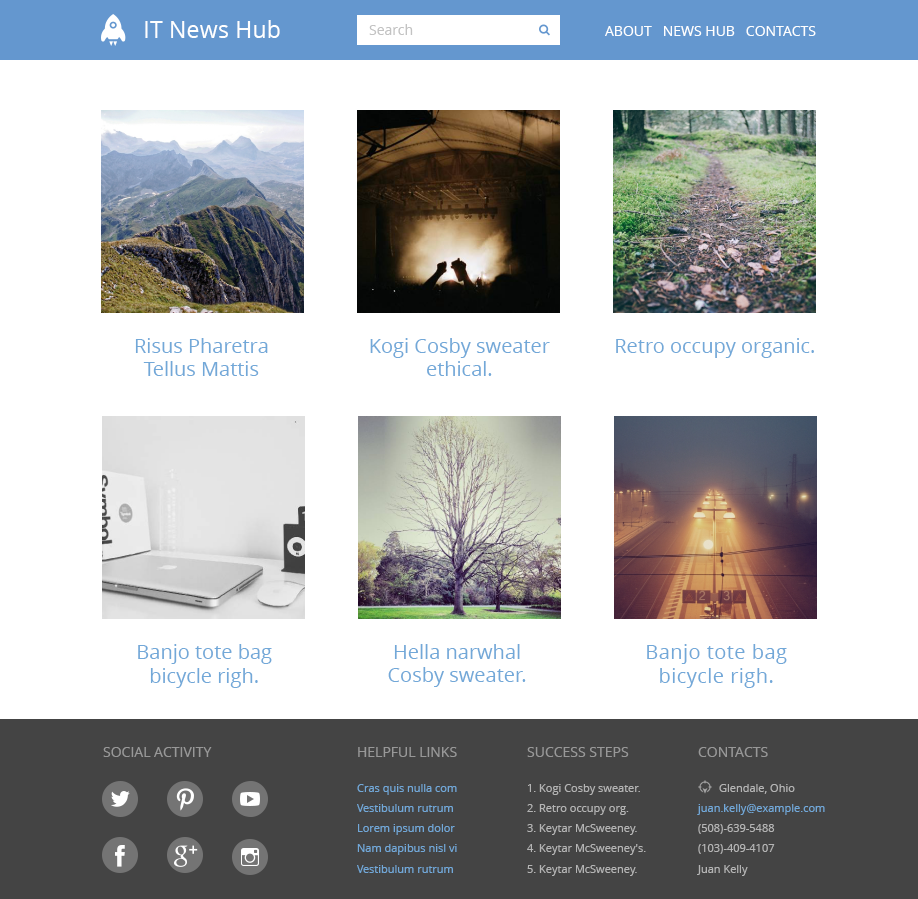
<style>
.page{position:relative;width:918px;height:899px;background:#ffffff}
.page>*{position:absolute;margin:0}
.t1{font:23.4px "OpenSans";color:#ffffff}
.t2{font:14px "OpenSans";color:#c3c3c3}
.t3{font:14px "OpenSans";letter-spacing:-0.017em;color:#c3c3c3}
.t4{font:14px "OpenSans";color:#ffffff}
.t5{font:14px "OpenSans";letter-spacing:-0.067em;color:#ffffff}
.t6{font:20px/23px "OpenSans";color:#72a8d8}
.t7{font:20px/23px "OpenSans";letter-spacing:-0.017em;color:#72a8d8}
.t8{font:20px/23px "OpenSans";letter-spacing:-0.111em;color:#72a8d8}
.t9{font:20px "OpenSans";color:#72a8d8}
.t10{font:20px "OpenSans";letter-spacing:-0.017em;color:#72a8d8}
.t11{font:20px/23px "OpenSans";letter-spacing:-0.091em;color:#72a8d8}
.t12{font:20px "OpenSans";letter-spacing:0.023em;color:#72a8d8}
.t13{font:14px "OpenSans";color:#989898}
.t14{font:14px "OpenSans";letter-spacing:-0.067em;color:#989898}
.t15{font:11px "OpenSans";color:#72a8d8}
.t16{font:11px "OpenSans";color:#b4b4b4}
.t17{font:11px "OpenSans";letter-spacing:-0.091em;color:#b4b4b4}
.t18{font:11px "OpenSans";letter-spacing:-0.054em;color:#72a8d8}
.t19{font:11px "OpenSans";letter-spacing:-0.017em;color:#b4b4b4}
.t20{font:11px "OpenSans";letter-spacing:-0.017em;color:#72a8d8}
.t21{font:11px "OpenSans";letter-spacing:-0.092em;color:#b4b4b4}
</style>
<div class="page">
<p class="t1" style="left:145px;top:20px;width:135px;height:18px">IT News Hub</p>
<p class="t2" style="left:369px;top:24px;width:44px;height:11px">Sea<span class="t3">r</span>ch</p>
<p class="t4" style="left:605px;top:26px;width:211px;height:10px">ABOUT   NEWS HUB   CON<span class="t5">T</span>ACTS</p>
<p class="t6" style="left:135px;top:338px;width:133px;height:38px;text-align:center">Risus Pha<span class="t7">r</span>etra<br><span class="t8">T</span>ellus Mattis</p>
<p class="t6" style="left:370px;top:338px;width:180px;height:38px;text-align:center">Kogi Cosby sweater<br>ethical.</p>
<p class="t9" style="left:616px;top:338px;width:198px;height:20px">Ret<span class="t10">r</span>o occupy organic.</p>
<p class="t9" style="left:138px;top:644px;width:134px;height:44px;text-align:center">Banjo tote bag<br>bicycle righ.</p>
<p class="t6" style="left:388px;top:644px;width:138px;height:43px;text-align:center">Hella narwhal<br>Cosby sweate<span class="t11">r</span>.</p>
<p class="t12" style="left:647px;top:644px;width:140px;height:44px;text-align:center">Banjo tote bag<br>bicycle righ.</p>
<p class="t13" style="left:103px;top:747px;width:109px;height:10px">SOCIAL ACTIVITY</p>
<p class="t13" style="left:358px;top:747px;width:99px;height:10px">HELPFUL LINKS</p>
<p class="t13" style="left:527px;top:747px;width:102px;height:10px">SUCCESS STEPS</p>
<p class="t13" style="left:698px;top:747px;width:70px;height:10px">CON<span class="t14">T</span>ACTS</p>
<p class="t15" style="left:357px;top:784px;width:100px;height:11px">Cras quis nulla com</p>
<p class="t16" style="left:528px;top:784px;width:112px;height:11px">1. Kogi Cosby sweate<span class="t17">r</span>.</p>
<p class="t16" style="left:719px;top:784px;width:76px;height:10px">Glendale, Ohio</p>
<p class="t15" style="left:357px;top:804px;width:96px;height:8px"><span class="t18">V</span>estibulum rutrum</p>
<p class="t16" style="left:527px;top:804px;width:102px;height:11px">2. Ret<span class="t19">r</span>o occupy org.</p>
<p class="t15" style="left:697px;top:804px;width:128px;height:11px">juan.kelly@example.com</p>
<p class="t15" style="left:358px;top:824px;width:97px;height:11px">Lo<span class="t20">r</span>em ipsum dolor</p>
<p class="t16" style="left:527px;top:824px;width:110px;height:11px">3. Keytar McSweene<span class="t21">y</span>.</p>
<p class="t16" style="left:698px;top:824px;width:77px;height:10px">(508)-639-5488</p>
<p class="t15" style="left:357px;top:844px;width:100px;height:11px">Nam dapibus nisl vi</p>
<p class="t16" style="left:527px;top:844px;width:119px;height:11px">4. Keytar McSweeney's.</p>
<p class="t16" style="left:698px;top:844px;width:77px;height:10px">(103)-409-4107</p>
<p class="t15" style="left:357px;top:865px;width:96px;height:8px"><span class="t18">V</span>estibulum rutrum</p>
<p class="t16" style="left:527px;top:865px;width:110px;height:11px">5. Keytar McSweene<span class="t21">y</span>.</p>
<p class="t16" style="left:697px;top:865px;width:51px;height:11px">Juan Kelly</p>
</div>
